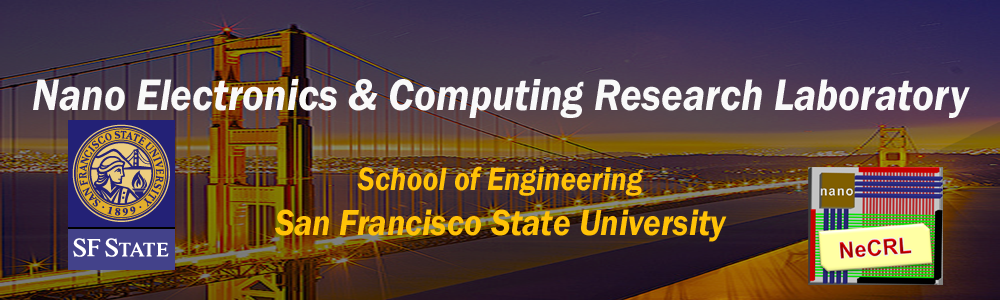
<style>
.page{position:relative;width:1000px;height:300px}
.page>*{position:absolute;margin:0}
.t1{font:45.8px "FranklinGothic-DemiItalic";color:#f9f9f9;scale:0.9 1}
.t2{font:33.3px "FranklinGothic-DemiItalic";color:#ffc207;scale:0.9 1}
.t3{font:37.5px "FranklinGothic-DemiItalic";color:#ffc207;scale:0.9 1}
</style>
<div class="page">
<p class="t1" style="left:33px;top:79px;width:937px;height:163px;text-align:center">Nano Electronics &amp; Computing Research Laboratory<br><br><span class="t2">School of Engineering<br></span><span class="t3">San Francisco State University</span></p>
</div>
